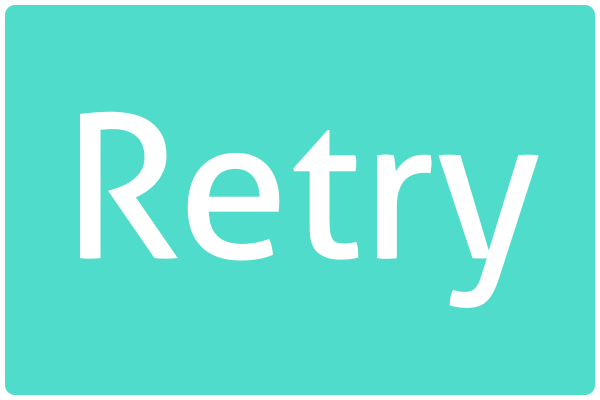
<style>
.page{position:relative;width:600px;height:400px;background:#50dcca}
.page>*{position:absolute;margin:0}
.t1{font:200px "Aller";color:#ffffff}
</style>
<div class="page">
<p class="t1" style="left:80px;top:111px;width:459px;height:197px">Retry</p>
</div>
